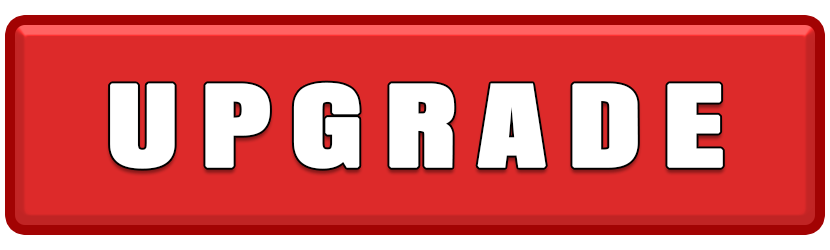
<style>
.page{position:relative;width:830px;height:250px;background:#dd2a2a}
.page>*{position:absolute;margin:0}
.t1{font:104.2px "Anton";letter-spacing:0.125em;color:#ffffff;font-weight:bold;scale:1.4 1}
</style>
<div class="page">
<p class="t1" style="left:110px;top:82px;width:613px;height:87px">UPGRADE</p>
</div>
